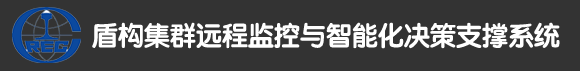
<style>
.page{position:relative;width:580px;height:71px;background:#333333}
.page>*{position:absolute;margin:0}
.t1{font:26px "STYuanti-SC-Bold";color:#ffffff}
</style>
<div class="page">
<p class="t1" style="left:92px;top:22px;width:468px;height:27px">盾构集群远程监控与智能化决策支撑系统</p>
</div>
